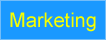
<style>
.page{position:relative;width:106px;height:40px;background:#1a99ff}
.page>*{position:absolute;margin:0}
.t1{font:20px "ArialMT";color:#f6ff00}
</style>
<div class="page">
<p class="t1" style="left:10px;top:12px;width:86px;height:20px">Marketing</p>
</div>
